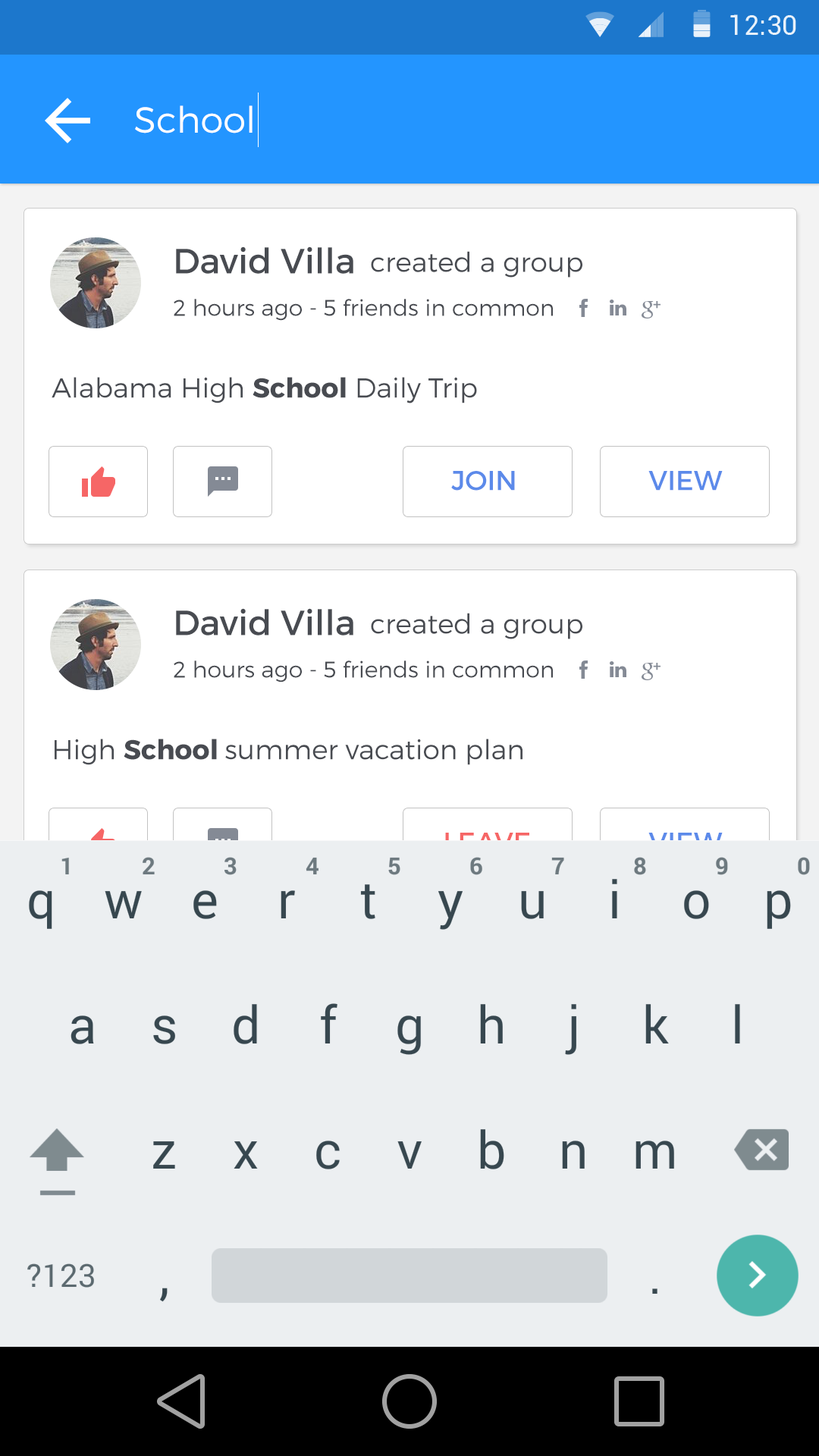
<style>
.page{position:relative;width:819px;height:1456px;background:#ffffff}
.page>*{position:absolute;margin:0}
.t1{font:36.4px "Montserrat-Light";color:#ffffff}
.t2{font:34.9px "Montserrat-Regular";color:#484b51}
.t3{font:27.3px "Montserrat-Light";color:#484b51}
.t4{font:22.7px "Montserrat-Light";color:#484b51}
.t5{font:27.3px "Montserrat-Bold";color:#484b51}
.t6{font:27.3px "Montserrat-Regular";color:#5c8aea}
.t7{font:27.3px "Montserrat-Regular"}
</style>
<div class="page">
<p class="t1" style="left:135px;top:105px;width:118px;height:28px">School</p>
<p class="t2" style="left:176px;top:246px;width:177px;height:28px">David Villa</p>
<p class="t3" style="left:371px;top:251px;width:211px;height:27px">created a group</p>
<p class="t4" style="left:174px;top:299px;width:379px;height:22px">2 hours ago - 5 friends in common</p>
<p class="t3" style="left:52px;top:377px;width:425px;height:26px">Alabama High <span class="t5">School</span> Daily Trip</p>
<p class="t6" style="left:451px;top:471px;width:64px;height:20px">JOIN</p>
<p class="t6" style="left:648px;top:471px;width:75px;height:20px">VIEW</p>
<p class="t2" style="left:176px;top:608px;width:177px;height:27px">David Villa</p>
<p class="t3" style="left:371px;top:613px;width:211px;height:26px">created a group</p>
<p class="t4" style="left:174px;top:660px;width:379px;height:22px">2 hours ago - 5 friends in common</p>
<p class="t3" style="left:55px;top:739px;width:467px;height:26px">High <span class="t5">School </span>summer vacation plan</p>
<p class="t7" style="left:445px;top:833px;width:85px;height:19px">LEAVE</p>
<p class="t7" style="left:648px;top:833px;width:75px;height:19px">VIEW</p>
</div>
